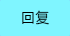
<style>
.page{position:relative;width:70px;height:36px;background:#7ff5ff}
.page>*{position:absolute;margin:0}
.t1{font:15px "STXihei";letter-spacing:-0.045em;color:#000000}
</style>
<div class="page">
<p class="t1" style="left:22px;top:10px;width:27px;height:15px">回复</p>
</div>
